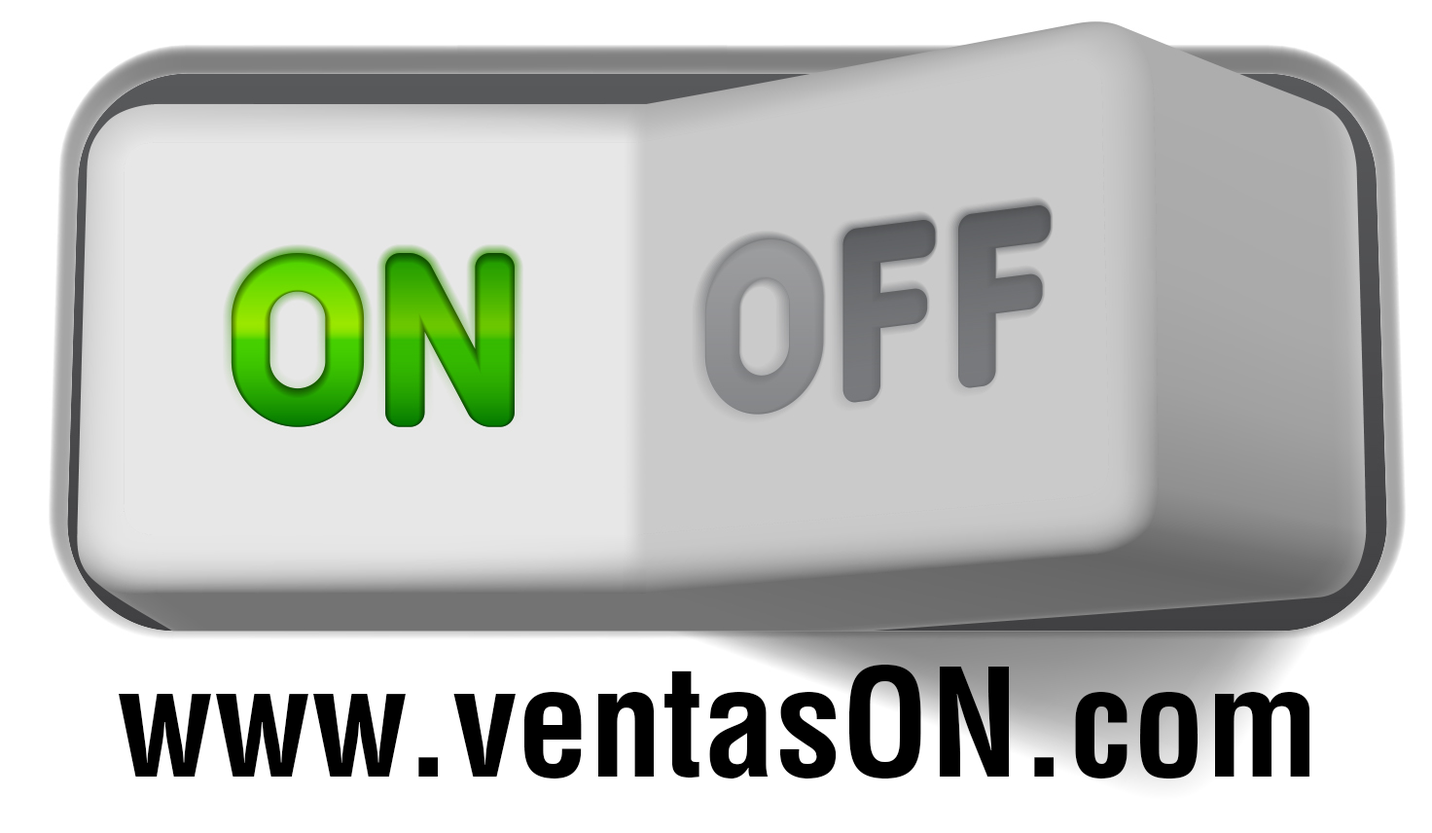
<style>
.page{position:relative;width:1432px;height:833px;background:#ffffff}
.page>*{position:absolute;margin:0}
.t1{font:145.9px "Helvetica-Condensed-Bold";color:#000000}
</style>
<div class="page">
<p class="t1" style="left:119px;top:663px;width:1190px;height:115px">www.ventasON.com</p>
</div>
